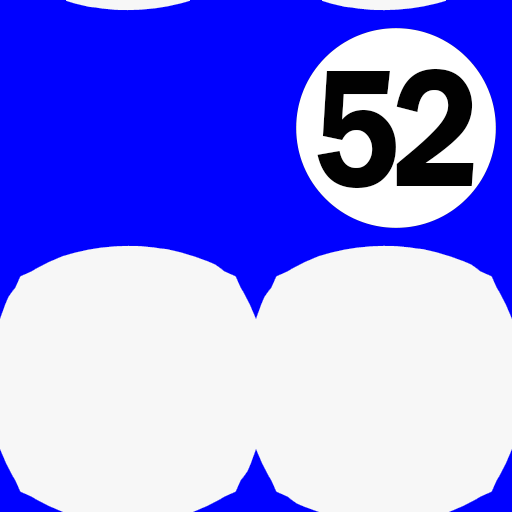
<style>
.page{position:relative;width:512px;height:512px;background:#f7f7f7}
.page>*{position:absolute;margin:0}
.t1{font:172.5px "FranklinGothic-Demi";letter-spacing:-0.05em;color:#010101;scale:0.87 1}
</style>
<div class="page">
<p class="t1" style="left:317px;top:69px;width:157px;height:119px">52</p>
</div>
